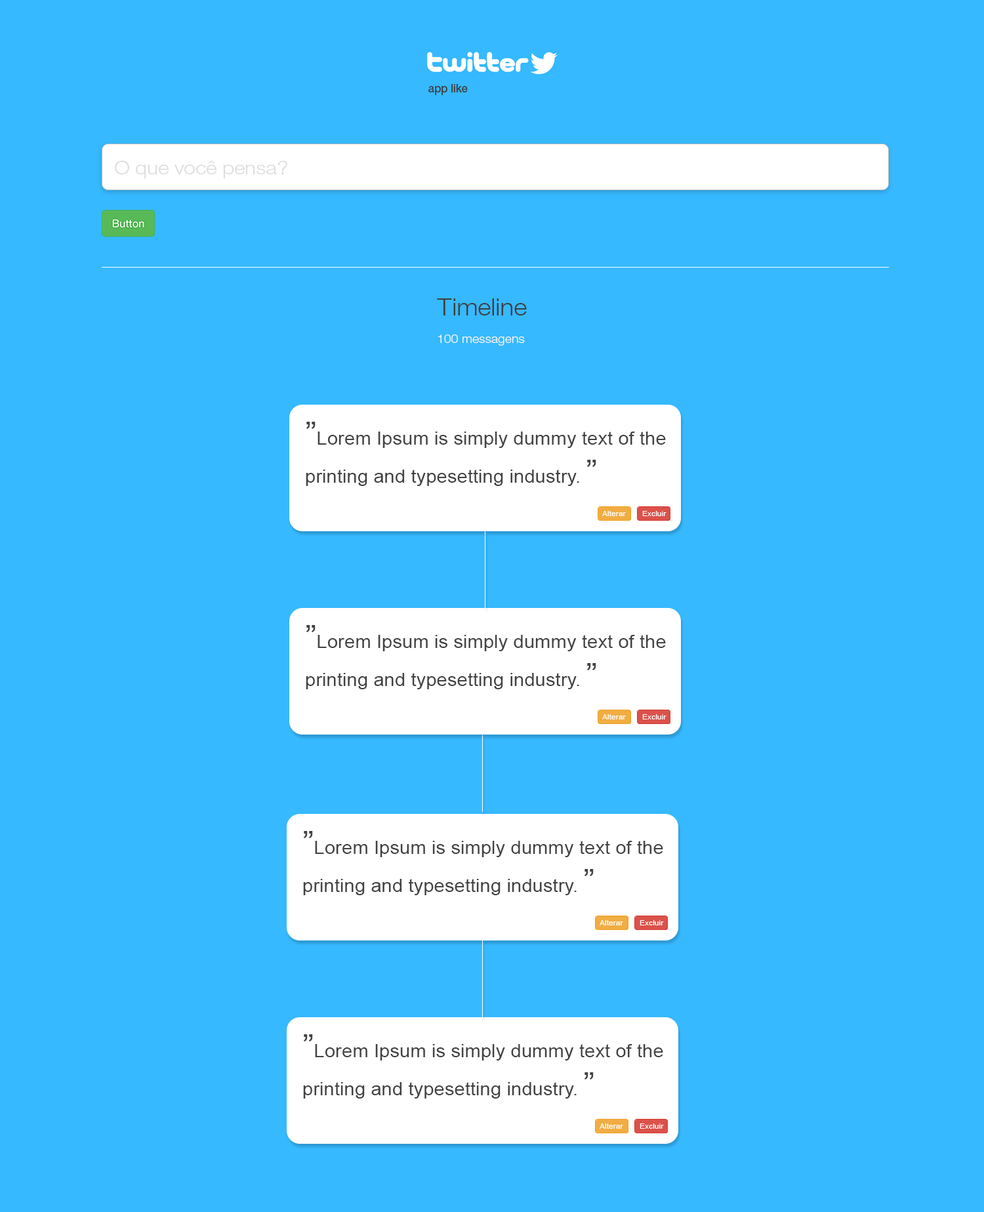
<style>
.page{position:relative;width:984px;height:1212px;background:#36b9ff}
.page>*{position:absolute;margin:0}
.t1{font:11.6px "HelveticaNeueLTPro-Md";letter-spacing:-0.01em;color:#3e3e3e;scale:0.95 1}
.t2{font:19.1px "HelveticaNeueLTPro-Lt";letter-spacing:-0.01em;color:#dddddd;scale:1.1 1}
.t3{font:23.6px "HelveticaNeueLTPro-Lt";letter-spacing:-0.01em;color:#3e3e3e;scale:1.1 1}
.t4{font:11.8px "HelveticaNeueLTPro-Lt";letter-spacing:-0.01em;color:#f5f5f5;scale:1.1 1}
.t5{font:17.5px "ArialMT";color:#434141;scale:1.1 1}
.t6{font:31.5px "ArialMT";color:#434141;scale:1.1 1}
.t7{font:7.2px "ArialMT";color:#ffffff;scale:1.1 1}
</style>
<div class="page">
<p class="t1" style="left:428px;top:84px;width:40px;height:11px">app like</p>
<p class="t2" style="left:115px;top:161px;width:172px;height:17px">O que você pensa?</p>
<p class="t3" style="left:437px;top:298px;width:90px;height:17px">Timeline</p>
<p class="t4" style="left:437px;top:334px;width:88px;height:12px">100 messagens</p>
<p class="t5" style="left:306px;top:422px;width:360px;height:64px"><span class="t6">”</span>Lorem Ipsum is simply dummy text of the <br>printing and typesetting industry. <span class="t6">”</span></p>
<p class="t7" style="left:602px;top:511px;width:24px;height:5px">Alterar</p>
<p class="t7" style="left:642px;top:511px;width:24px;height:5px">Excluir</p>
<p class="t5" style="left:306px;top:625px;width:360px;height:64px"><span class="t6">”</span>Lorem Ipsum is simply dummy text of the <br>printing and typesetting industry. <span class="t6">”</span></p>
<p class="t7" style="left:602px;top:714px;width:24px;height:5px">Alterar</p>
<p class="t7" style="left:642px;top:714px;width:24px;height:5px">Excluir</p>
<p class="t5" style="left:303px;top:831px;width:360px;height:64px"><span class="t6">”</span>Lorem Ipsum is simply dummy text of the <br>printing and typesetting industry. <span class="t6">”</span></p>
<p class="t7" style="left:599px;top:920px;width:24px;height:5px">Alterar</p>
<p class="t7" style="left:639px;top:920px;width:25px;height:5px">Excluir</p>
<p class="t5" style="left:303px;top:1034px;width:360px;height:65px"><span class="t6">”</span>Lorem Ipsum is simply dummy text of the <br>printing and typesetting industry. <span class="t6">”</span></p>
<p class="t7" style="left:599px;top:1124px;width:24px;height:5px">Alterar</p>
<p class="t7" style="left:639px;top:1124px;width:25px;height:5px">Excluir</p>
</div>
